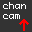
<style>
.page{position:relative;width:32px;height:32px;background:#333333}
.page>*{position:absolute;margin:0}
.t1{font:9px/10.4px "Monaco";letter-spacing:0.06em;color:#ffffff}
.t2{font:23.7px "Monaco";letter-spacing:0.06em;color:#ff0000}
</style>
<div class="page">
<p class="t1" style="left:3px;top:2px;width:23px;height:17px">chan<br>cam</p>
<p class="t2" style="left:19px;top:19px;width:10px;height:12px;rotate:-90deg">→</p>
</div>
